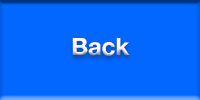
<style>
.page{position:relative;width:200px;height:100px;background:#0267ff}
.page>*{position:absolute;margin:0}
.t1{font:24px "HelveticaNeue-Bold";color:#ffffff}
</style>
<div class="page">
<p class="t1" style="left:72px;top:38px;width:58px;height:18px">Back</p>
</div>
